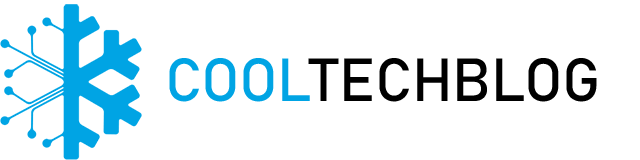
<style>
.page{position:relative;width:640px;height:160px;background:#ffffff}
.page>*{position:absolute;margin:0}
.t1{font:60px "Bahnschrift";color:#000000}
.t2{font:60px "Bahnschrift";color:#00a4e4}
</style>
<div class="page">
<p class="t1" style="left:169px;top:58px;width:428px;height:44px"><span class="t2">COOL</span>TECHBLOG</p>
</div>
